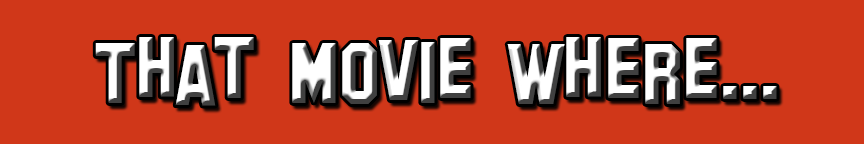
<style>
.page{position:relative;width:864px;height:144px;background:#d03719}
.page>*{position:absolute;margin:0}
.t1{font:85.9px "SFHollywoodHills"}
</style>
<div class="page">
<p class="t1" style="left:95px;top:37px;width:682px;height:69px">That Movie Where...</p>
</div>
